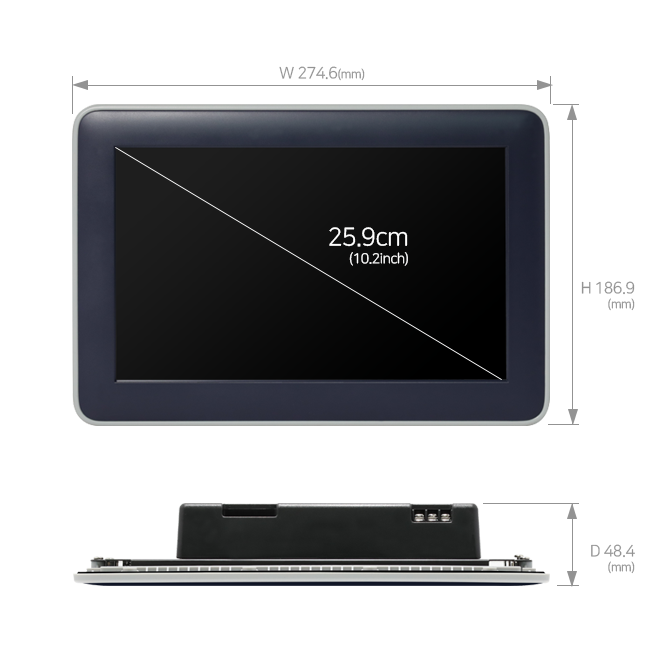
<style>
.page{position:relative;width:650px;height:650px;background:#ffffff}
.page>*{position:absolute;margin:0}
.t1{font:16px "NanumSquareR";letter-spacing:-0.03em;color:#939393}
.t2{font:12px "NanumSquareR";letter-spacing:-0.03em;color:#939393}
.t3{font:14px/18px "NanumSquareR";letter-spacing:-0.03em;color:#ffffff}
.t4{font:25px/18px "NanumSquareR";letter-spacing:-0.03em;color:#ffffff}
.t5{font:16px/15px "NanumSquareR";letter-spacing:-0.03em;color:#939393}
.t6{font:12px/15px "NanumSquareR";letter-spacing:-0.03em;color:#939393}
</style>
<div class="page">
<p class="t1" style="left:279px;top:66px;width:86px;height:15px">W 274.6<span class="t2">(mm)</span></p>
<p class="t3" style="left:329px;top:227px;width:79px;height:39px;text-align:right"><span class="t4">25.9cm<br></span>(10.2inch)</p>
<p class="t5" style="left:581px;top:281px;width:54px;height:30px;text-align:right">H 186.9<br><span class="t6">(mm)</span></p>
<p class="t5" style="left:591px;top:544px;width:44px;height:30px;text-align:right">D 48.4<br><span class="t6">(mm)</span></p>
</div>
